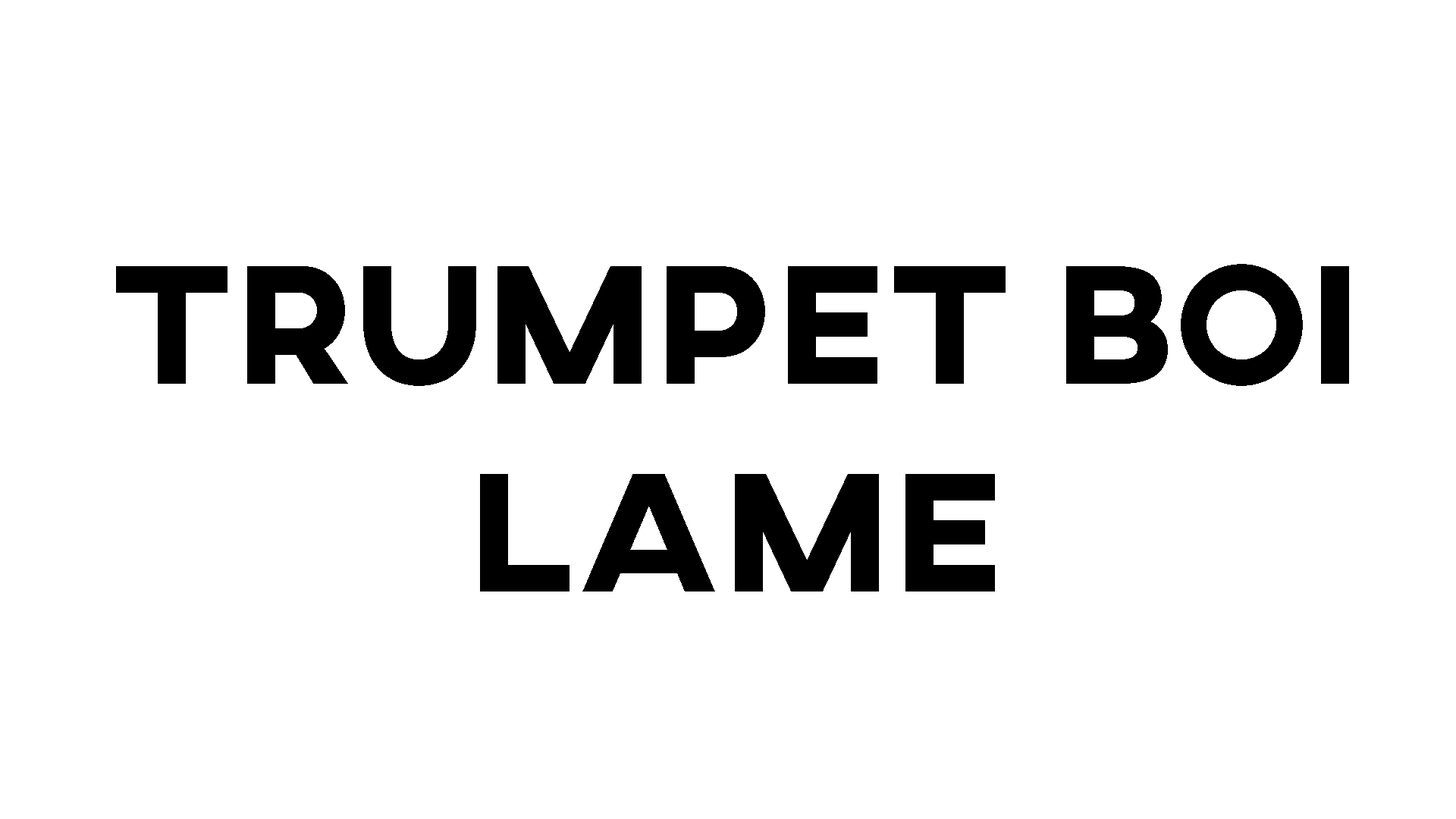
<style>
.page{position:relative;width:1456px;height:819px;background:#ffffff}
.page>*{position:absolute;margin:0}
.t1{font:172.9px "AXIS-ExtraBold";color:#000000}
</style>
<div class="page">
<p class="t1" style="left:116px;top:264px;width:1233px;height:327px;text-align:center">TRUMPET BOI<br>LAME</p>
</div>
